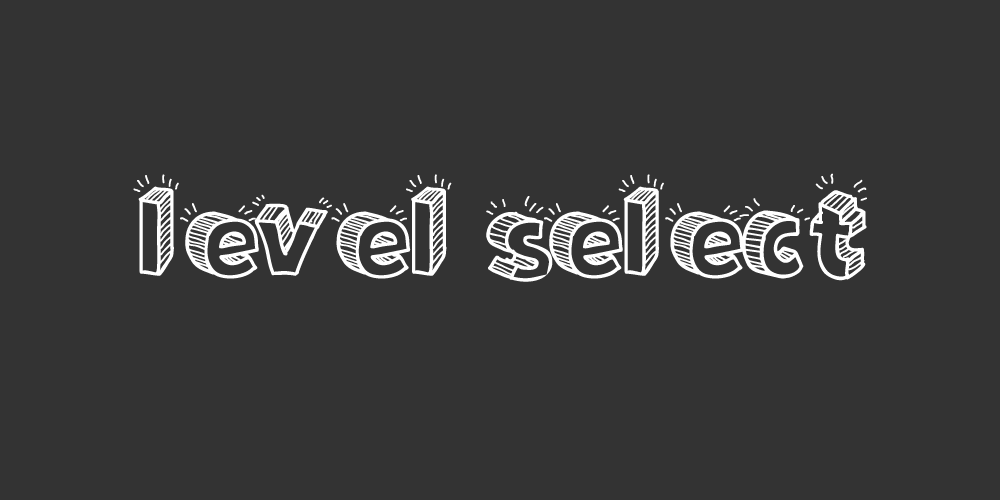
<style>
.page{position:relative;width:1000px;height:500px;background:#333333}
.page>*{position:absolute;margin:0}
.t1{font:125px "Sketch3D";color:#ffffff}
</style>
<div class="page">
<p class="t1" style="left:133px;top:173px;width:734px;height:109px">level select</p>
</div>
